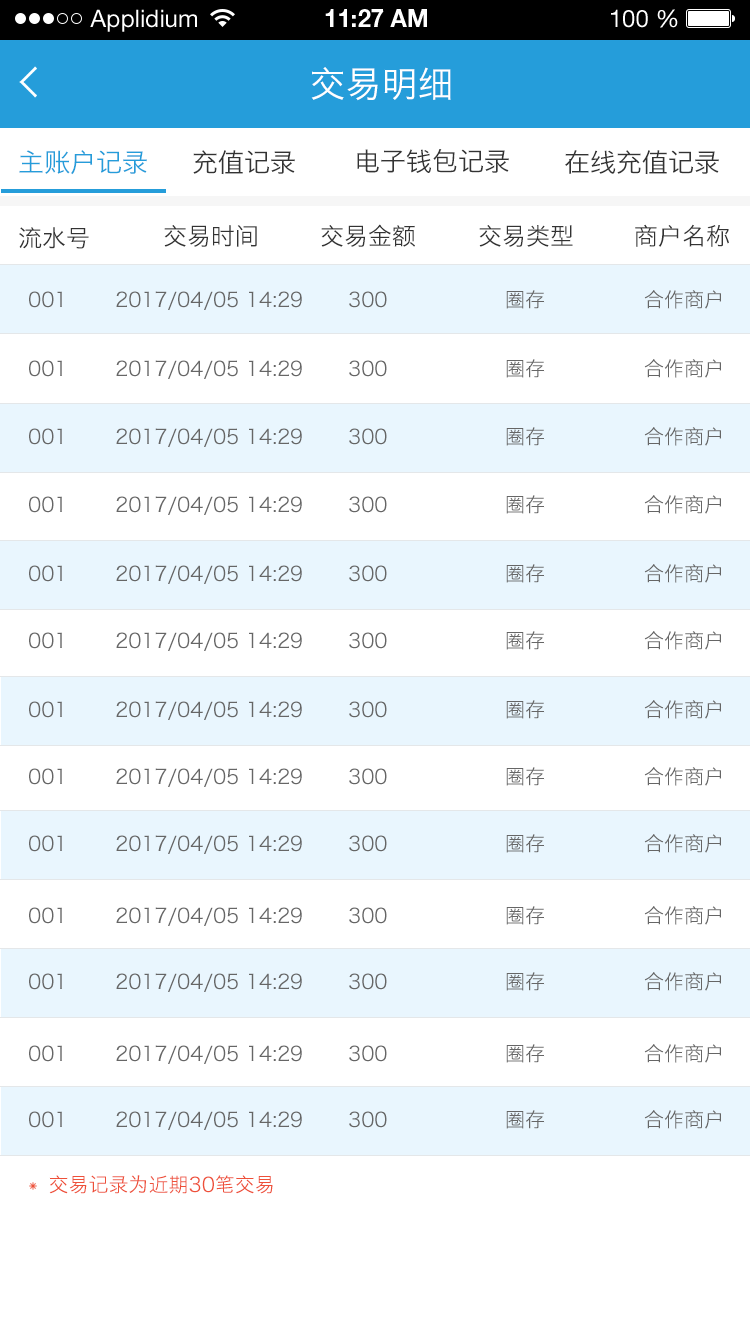
<style>
.page{position:relative;width:750px;height:1334px;background:#ffffff}
.page>*{position:absolute;margin:0}
.t1{font:24px "HelveticaNeueLTStd-Roman";color:#ffffff}
.t2{font:24px "HelveticaNeueLTStd-Bd";color:#ffffff}
.t3{font:36px "HiraginoSansGB-W3";color:#ffffff;text-transform:uppercase}
.t4{font:26px "HiraginoSansGB-W3";color:#259dda;text-transform:uppercase}
.t5{font:26px "HiraginoSansGB-W3";color:#333333;text-transform:uppercase}
.t6{font:24px "HiraginoSansGB-W3";color:#333333;text-transform:uppercase}
.t7{font:20px "HiraginoSansGB-W3";color:#666666;text-transform:uppercase}
.t8{font:20px "HiraginoSansGB-W3";color:#ee5039;text-transform:uppercase}
</style>
<div class="page">
<p class="t1" style="left:90px;top:9px;width:107px;height:23px">Applidium</p>
<p class="t2" style="left:325px;top:9px;width:102px;height:18px">11:27 AM</p>
<p class="t1" style="left:611px;top:9px;width:67px;height:19px">100 %</p>
<p class="t3" style="left:311px;top:67px;width:140px;height:34px">交易明细</p>
<p class="t4" style="left:19px;top:150px;width:128px;height:25px">主账户记录</p>
<p class="t5" style="left:193px;top:150px;width:102px;height:25px">充值记录</p>
<p class="t5" style="left:357px;top:149px;width:152px;height:24px">电子钱包记录</p>
<p class="t5" style="left:565px;top:150px;width:154px;height:25px">在线充值记录</p>
<p class="t6" style="left:19px;top:227px;width:70px;height:22px">流水号</p>
<p class="t6" style="left:164px;top:225px;width:93px;height:22px">交易时间</p>
<p class="t6" style="left:321px;top:224px;width:94px;height:23px">交易金额</p>
<p class="t6" style="left:479px;top:225px;width:94px;height:22px">交易类型</p>
<p class="t6" style="left:635px;top:224px;width:94px;height:23px">商户名称</p>
<p class="t7" style="left:29px;top:291px;width:33px;height:17px">001</p>
<p class="t7" style="left:116px;top:291px;width:186px;height:19px">2017/04/05 14:29</p>
<p class="t7" style="left:349px;top:291px;width:38px;height:17px">300</p>
<p class="t7" style="left:506px;top:290px;width:39px;height:19px">圈存</p>
<p class="t7" style="left:644px;top:290px;width:77px;height:19px">合作商户</p>
<p class="t7" style="left:29px;top:360px;width:33px;height:17px">001</p>
<p class="t7" style="left:116px;top:360px;width:186px;height:19px">2017/04/05 14:29</p>
<p class="t7" style="left:349px;top:360px;width:38px;height:17px">300</p>
<p class="t7" style="left:506px;top:359px;width:39px;height:19px">圈存</p>
<p class="t7" style="left:644px;top:359px;width:77px;height:19px">合作商户</p>
<p class="t7" style="left:29px;top:428px;width:33px;height:17px">001</p>
<p class="t7" style="left:116px;top:428px;width:186px;height:19px">2017/04/05 14:29</p>
<p class="t7" style="left:349px;top:428px;width:38px;height:17px">300</p>
<p class="t7" style="left:506px;top:427px;width:39px;height:19px">圈存</p>
<p class="t7" style="left:644px;top:427px;width:77px;height:19px">合作商户</p>
<p class="t7" style="left:29px;top:496px;width:33px;height:17px">001</p>
<p class="t7" style="left:116px;top:496px;width:186px;height:19px">2017/04/05 14:29</p>
<p class="t7" style="left:349px;top:496px;width:38px;height:17px">300</p>
<p class="t7" style="left:506px;top:495px;width:39px;height:19px">圈存</p>
<p class="t7" style="left:644px;top:495px;width:77px;height:19px">合作商户</p>
<p class="t7" style="left:29px;top:565px;width:33px;height:17px">001</p>
<p class="t7" style="left:116px;top:565px;width:186px;height:19px">2017/04/05 14:29</p>
<p class="t7" style="left:349px;top:565px;width:38px;height:17px">300</p>
<p class="t7" style="left:506px;top:564px;width:39px;height:19px">圈存</p>
<p class="t7" style="left:644px;top:564px;width:77px;height:19px">合作商户</p>
<p class="t7" style="left:29px;top:632px;width:33px;height:17px">001</p>
<p class="t7" style="left:116px;top:632px;width:186px;height:19px">2017/04/05 14:29</p>
<p class="t7" style="left:349px;top:632px;width:38px;height:17px">300</p>
<p class="t7" style="left:506px;top:631px;width:39px;height:19px">圈存</p>
<p class="t7" style="left:644px;top:631px;width:77px;height:19px">合作商户</p>
<p class="t7" style="left:29px;top:701px;width:33px;height:17px">001</p>
<p class="t7" style="left:116px;top:701px;width:186px;height:19px">2017/04/05 14:29</p>
<p class="t7" style="left:349px;top:701px;width:38px;height:17px">300</p>
<p class="t7" style="left:506px;top:700px;width:39px;height:19px">圈存</p>
<p class="t7" style="left:644px;top:700px;width:77px;height:19px">合作商户</p>
<p class="t7" style="left:29px;top:768px;width:33px;height:17px">001</p>
<p class="t7" style="left:116px;top:768px;width:186px;height:19px">2017/04/05 14:29</p>
<p class="t7" style="left:349px;top:768px;width:38px;height:17px">300</p>
<p class="t7" style="left:506px;top:767px;width:39px;height:19px">圈存</p>
<p class="t7" style="left:644px;top:767px;width:77px;height:19px">合作商户</p>
<p class="t7" style="left:29px;top:835px;width:33px;height:17px">001</p>
<p class="t7" style="left:116px;top:835px;width:186px;height:19px">2017/04/05 14:29</p>
<p class="t7" style="left:349px;top:835px;width:38px;height:17px">300</p>
<p class="t7" style="left:506px;top:834px;width:39px;height:19px">圈存</p>
<p class="t7" style="left:644px;top:834px;width:77px;height:19px">合作商户</p>
<p class="t7" style="left:29px;top:907px;width:33px;height:17px">001</p>
<p class="t7" style="left:116px;top:907px;width:186px;height:19px">2017/04/05 14:29</p>
<p class="t7" style="left:349px;top:907px;width:38px;height:17px">300</p>
<p class="t7" style="left:506px;top:906px;width:39px;height:19px">圈存</p>
<p class="t7" style="left:644px;top:906px;width:77px;height:19px">合作商户</p>
<p class="t7" style="left:29px;top:973px;width:33px;height:17px">001</p>
<p class="t7" style="left:116px;top:973px;width:186px;height:19px">2017/04/05 14:29</p>
<p class="t7" style="left:349px;top:973px;width:38px;height:17px">300</p>
<p class="t7" style="left:506px;top:972px;width:39px;height:19px">圈存</p>
<p class="t7" style="left:644px;top:972px;width:77px;height:19px">合作商户</p>
<p class="t7" style="left:29px;top:1045px;width:33px;height:17px">001</p>
<p class="t7" style="left:116px;top:1045px;width:186px;height:19px">2017/04/05 14:29</p>
<p class="t7" style="left:349px;top:1045px;width:38px;height:17px">300</p>
<p class="t7" style="left:506px;top:1044px;width:39px;height:19px">圈存</p>
<p class="t7" style="left:644px;top:1044px;width:77px;height:19px">合作商户</p>
<p class="t7" style="left:506px;top:1110px;width:39px;height:19px">圈存</p>
<p class="t7" style="left:644px;top:1110px;width:77px;height:19px">合作商户</p>
<p class="t7" style="left:29px;top:1111px;width:33px;height:17px">001</p>
<p class="t7" style="left:116px;top:1111px;width:186px;height:19px">2017/04/05 14:29</p>
<p class="t7" style="left:349px;top:1111px;width:38px;height:17px">300</p>
<p class="t8" style="left:49px;top:1175px;width:224px;height:19px">交易记录为近期30笔交易</p>
</div>
